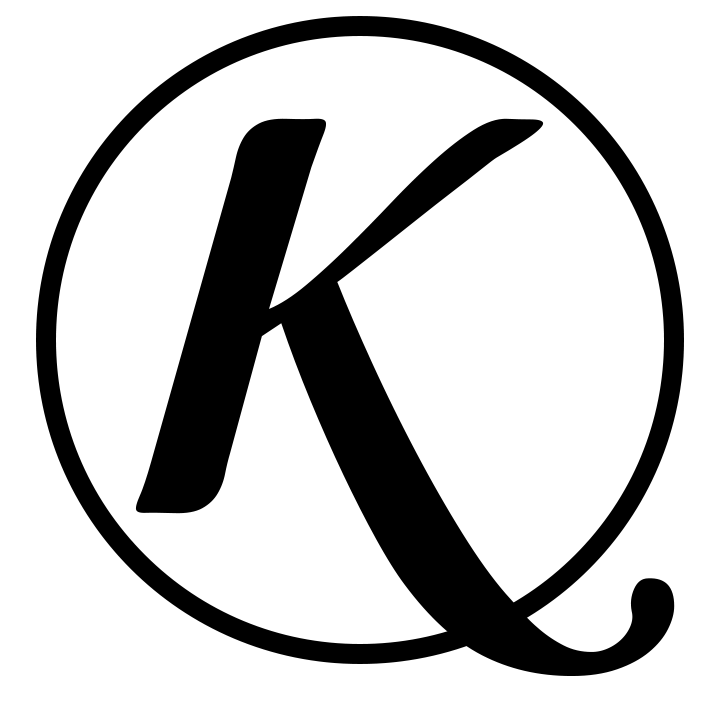
<style>
.page{position:relative;width:720px;height:720px;background:#ffffff}
.page>*{position:absolute;margin:0}
.t1{font:588.7px "Amperzand";color:#000000}
</style>
<div class="page">
<p class="t1" style="left:135px;top:118px;width:540px;height:558px">K</p>
</div>
